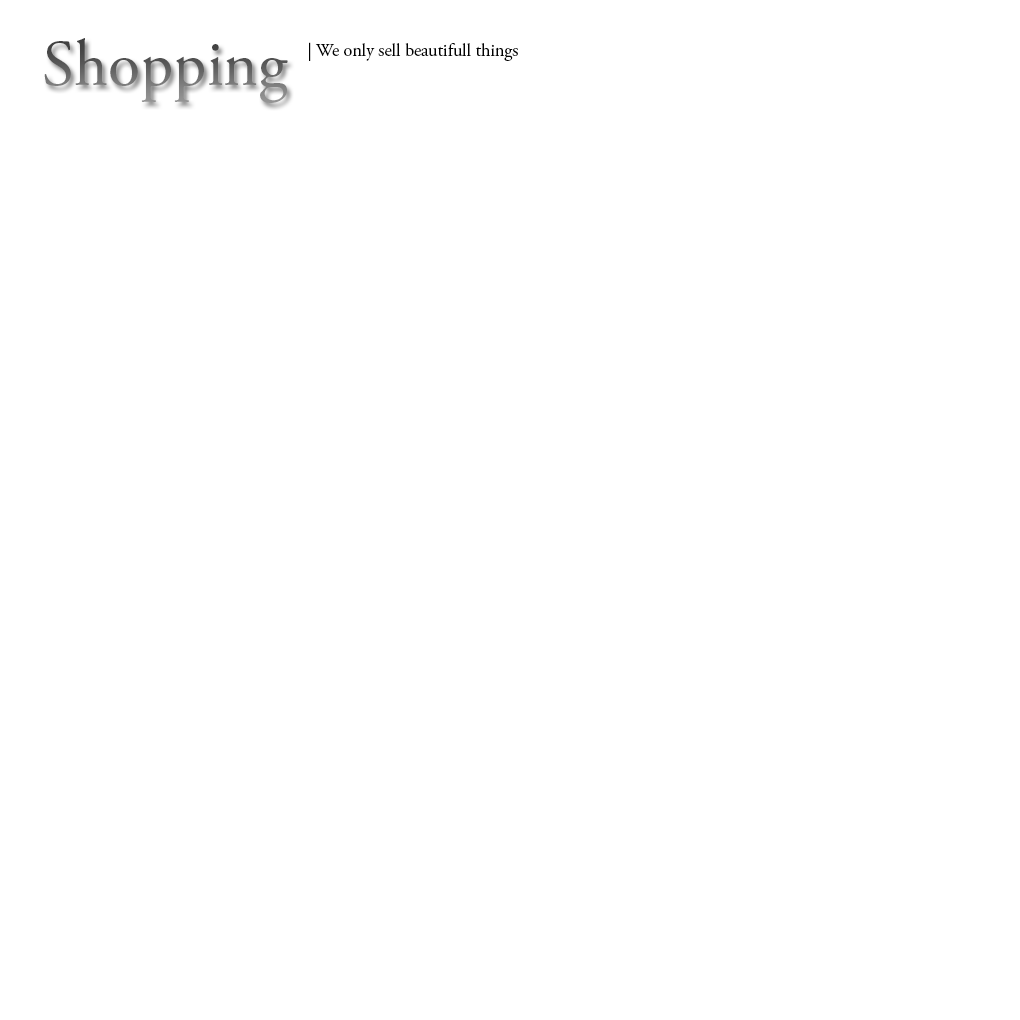
<style>
.page{position:relative;width:1020px;height:1020px;background:#ffffff}
.page>*{position:absolute;margin:0}
.t1{font:65.9px "AGaramondPro-Regular"}
.t2{font:18px "AGaramondPro-Regular";color:#020202}
</style>
<div class="page">
<p class="t1" style="left:44px;top:38px;width:244px;height:65px">Shopping</p>
<p class="t2" style="left:309px;top:42px;width:209px;height:19px">| We only sell beautifull things</p>
</div>
